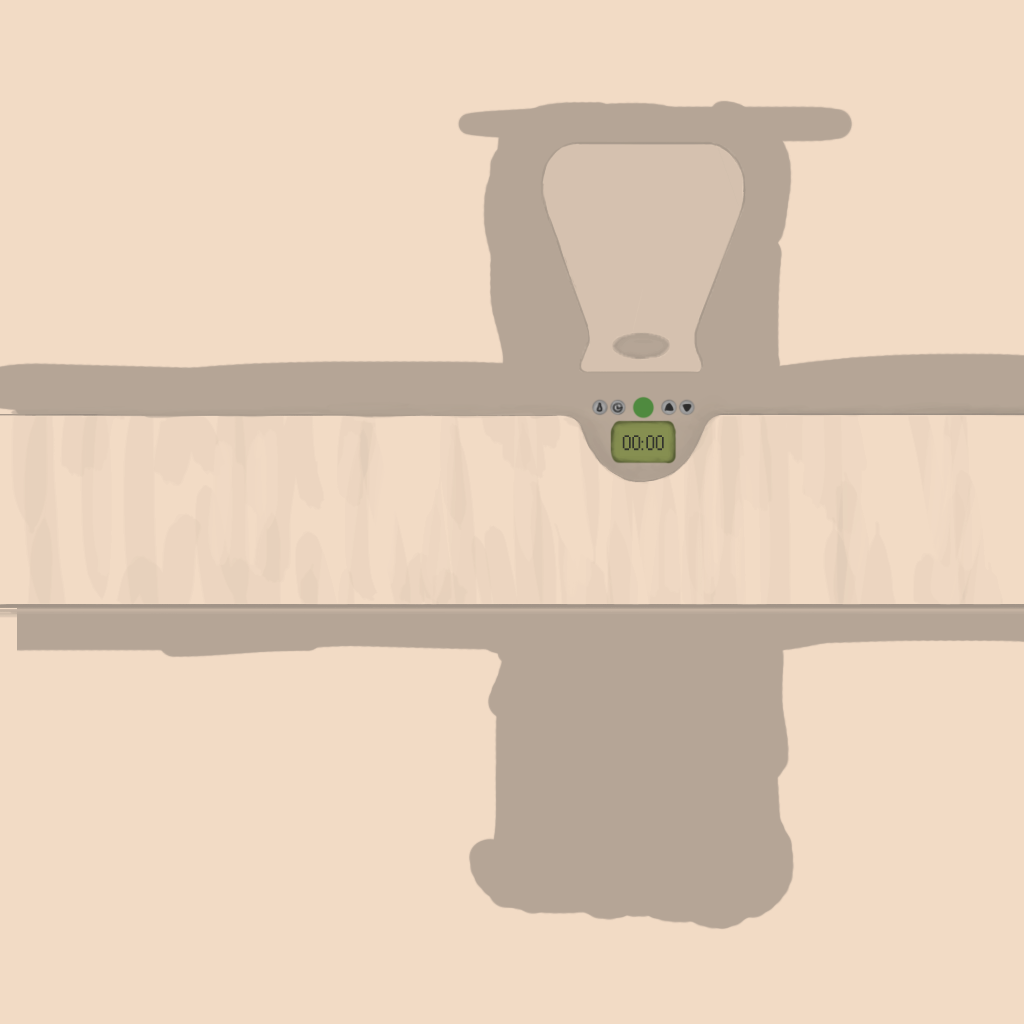
<style>
.page{position:relative;width:1024px;height:1024px;background:#f2dbc5}
.page>*{position:absolute;margin:0}
.t1{font:20px "Small Fonts";color:#32332d}
</style>
<div class="page">
<p class="t1" style="left:622px;top:435px;width:42px;height:16px">00:00</p>
</div>
